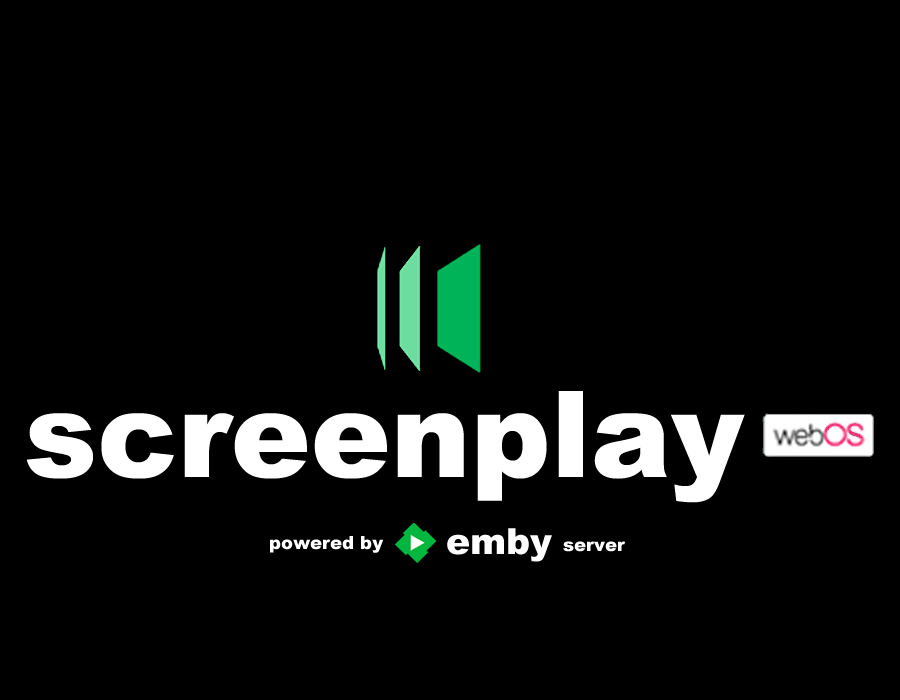
<style>
.page{position:relative;width:900px;height:700px;background:#000000}
.page>*{position:absolute;margin:0}
.t1{font:120px "Arial-Black";color:#ffffff}
.t2{font:36px "Arial-Black";color:#ffffff}
.t3{font:18px "Arial-Black";color:#ffffff}
</style>
<div class="page">
<p class="t1" style="left:27px;top:391px;width:718px;height:112px">screenplay</p>
<p class="t2" style="left:447px;top:528px;width:105px;height:34px">emby</p>
<p class="t3" style="left:270px;top:536px;width:114px;height:17px">powered by</p>
<p class="t3" style="left:563px;top:541px;width:63px;height:11px">server</p>
</div>
